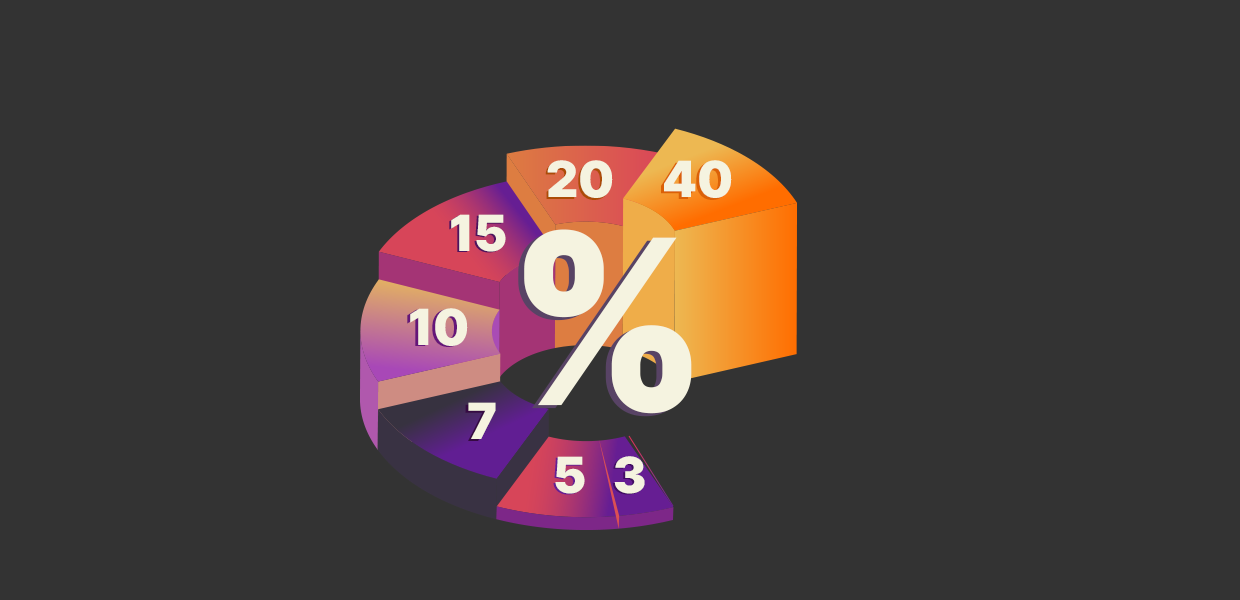
<style>
.page{position:relative;width:1240px;height:600px;background:#333333}
.page>*{position:absolute;margin:0}
.t1{font:49.7px "Inter-Black";color:#f5f3e0;text-transform:uppercase}
.t2{font:230px "Inter-Black";color:#f5f3e0;text-transform:uppercase}
</style>
<div class="page">
<p class="t1" style="left:547px;top:160px;width:66px;height:38px">20</p>
<p class="t1" style="left:664px;top:160px;width:68px;height:38px">40</p>
<p class="t1" style="left:545px;top:162px;width:66px;height:38px">20</p>
<p class="t1" style="left:661px;top:162px;width:68px;height:38px">40</p>
<p class="t1" style="left:449px;top:215px;width:55px;height:38px">15</p>
<p class="t1" style="left:451px;top:214px;width:55px;height:38px">15</p>
<p class="t2" style="left:518px;top:232px;width:168px;height:185px">%</p>
<p class="t2" style="left:524px;top:229px;width:168px;height:185px">%</p>
<p class="t1" style="left:407px;top:309px;width:58px;height:38px">10</p>
<p class="t1" style="left:410px;top:308px;width:58px;height:38px">10</p>
<p class="t1" style="left:465px;top:404px;width:28px;height:37px">7</p>
<p class="t1" style="left:468px;top:402px;width:28px;height:37px">7</p>
<p class="t1" style="left:553px;top:457px;width:30px;height:38px">5</p>
<p class="t1" style="left:555px;top:456px;width:30px;height:38px">5</p>
<p class="t1" style="left:612px;top:457px;width:31px;height:38px">3</p>
<p class="t1" style="left:614px;top:456px;width:31px;height:38px">3</p>
</div>
